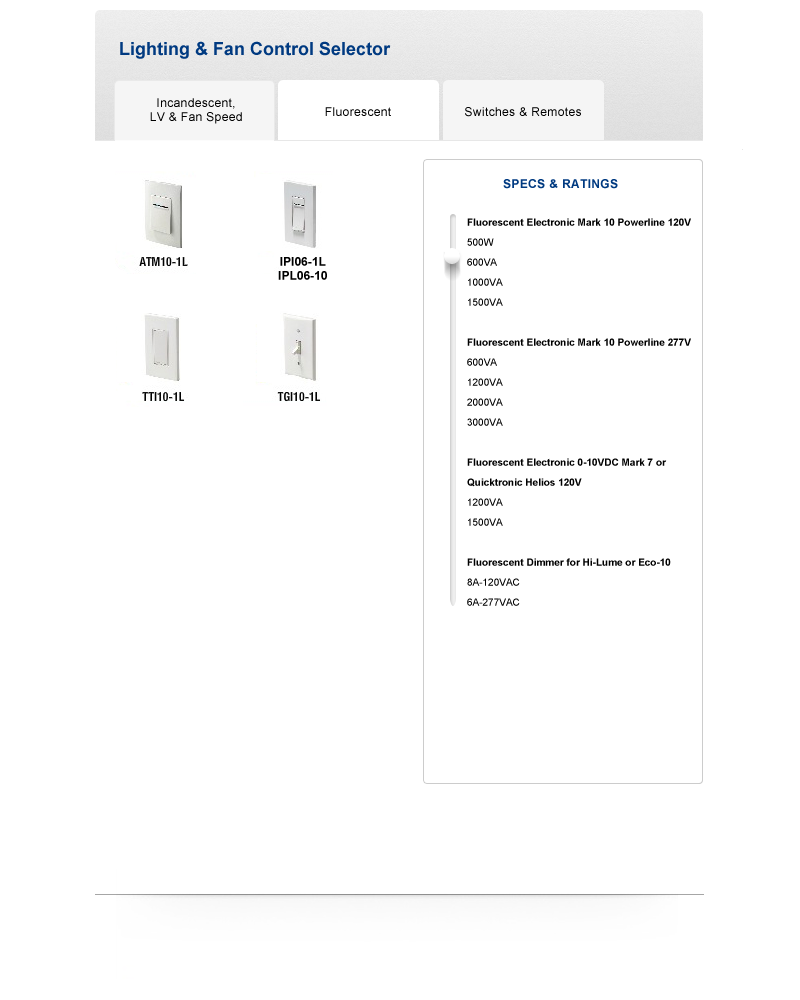
<style>
.page{position:relative;width:800px;height:1000px;background:#ffffff}
.page>*{position:absolute;margin:0}
.t1{font:18px "Arial-BoldMT";color:#003a81}
.t2{font:12px/14px "ArialMT";letter-spacing:0.03em;color:#000000}
.t3{font:12px "ArialMT";letter-spacing:0.03em;color:#000000}
.t4{font:12px "Arial-BoldMT";letter-spacing:0.03em;color:#003a81;text-transform:uppercase}
.t5{font:10px/20px "Arial-BoldMT";color:#000000}
.t6{font:10px/20px "ArialMT";color:#000000}
.t7{font:12px/14px "Arial-BoldMT";color:#000000}
</style>
<div class="page">
<p class="t1" style="left:120px;top:41px;width:271px;height:18px">Lighting &amp; Fan Control Selector</p>
<p class="t2" style="left:150px;top:98px;width:92px;height:26px;text-align:center">Incandescent,<br>LV &amp; Fan Speed</p>
<p class="t3" style="left:325px;top:107px;width:66px;height:9px">Fluorescent</p>
<p class="t3" style="left:465px;top:107px;width:116px;height:10px">Switches &amp; Remotes</p>
<p class="t4" style="left:503px;top:179px;width:115px;height:10px">Specs &amp; Ratings</p>
<p class="t5" style="left:467px;top:218px;width:224px;height:388px">Fluorescent Electronic Mark 10 Powerline 120V <br><span class="t6">500W<br>600VA<br>1000VA<br>1500VA<br></span><br>Fluorescent Electronic Mark 10 Powerline 277V <br><span class="t6">600VA<br>1200VA<br>2000VA<br>3000VA<br></span><br>Fluorescent Electronic 0-10VDC Mark 7 or Quicktronic Helios 120V <br><span class="t6">1200VA<br>1500VA<br></span><br>Fluorescent Dimmer for Hi-Lume or Eco-10 <br><span class="t6">8A-120VAC<br>6A-277VAC</span></p>
<p class="t7" style="left:278px;top:257px;width:49px;height:23px;text-align:center">IPI06-1L<br>IPL06-10</p>
</div>
